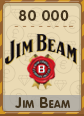
<style>
.page{position:relative;width:84px;height:116px;background:#eadab4}
.page>*{position:absolute;margin:0}
.t1{font:15px "RotondaC-Bold";letter-spacing:0.04em;color:#43341d;text-transform:uppercase}
.t2{font:15px "RotondaC-Bold";letter-spacing:0.04em;color:#43341d;font-variant:small-caps}
</style>
<div class="page">
<p class="t1" style="left:19px;top:10px;width:50px;height:11px">80 000</p>
<p class="t2" style="left:15px;top:97px;width:55px;height:11px">Jim Beam</p>
</div>
